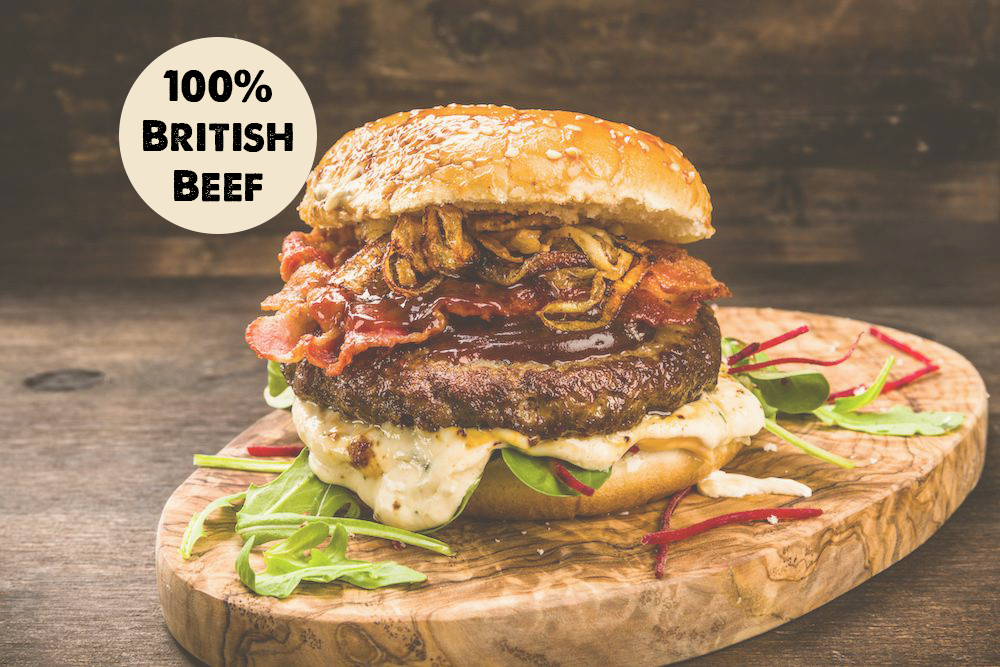
<style>
.page{position:relative;width:1000px;height:667px}
.page>*{position:absolute;margin:0}
.t1{font:41.7px "ALoveofThunder";color:#000000}
</style>
<div class="page">
<p class="t1" style="left:142px;top:69px;width:151px;height:133px;text-align:center">100% British Beef</p>
</div>
